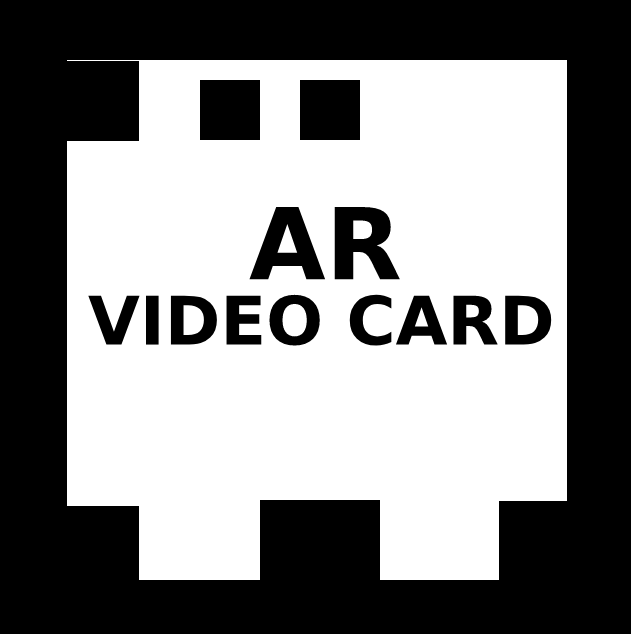
<style>
.page{position:relative;width:631px;height:634px;background:#ffffff}
.page>*{position:absolute;margin:0}
.t1{font:99px "DejaVuSans-Bold";color:#000000}
.t2{font:67px "DejaVuSans-Bold";color:#000000}
</style>
<div class="page">
<p class="t1" style="left:249px;top:207px;width:151px;height:73px">AR</p>
<p class="t2" style="left:88px;top:294px;width:464px;height:52px">VIDEO CARD</p>
</div>
